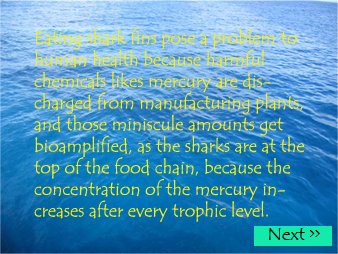
<style>
.page{position:relative;width:338px;height:254px}
.page>*{position:absolute;margin:0}
.t1{font:18px "TempusSansITC";color:#f5ed15}
</style>
<div class="page">
<p class="t1" style="left:33px;top:27px;width:271px;height:195px">Eating shark fins pose a problem to human health because harmful chemicals likes mercury are discharged from manufacturing plants, and those miniscule amounts get bioamplified, as the sharks are at the top of the food chain, because the concentration of the mercury increases after every trophic level.</p>
</div>
